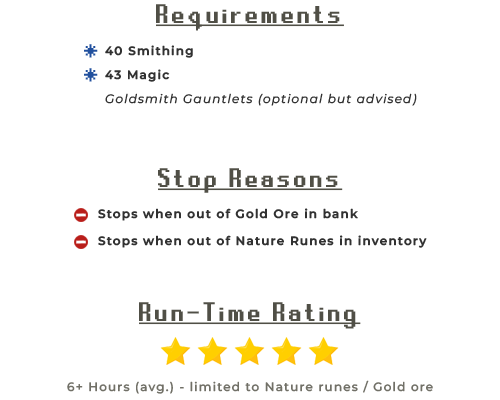
<style>
.page{position:relative;width:500px;height:400px;background:#ffffff}
.page>*{position:absolute;margin:0}
.t1{font:30px "RuneScape-UF";letter-spacing:0.1em;color:#504f46;text-decoration:underline}
.t2{font:30px "RuneScape-UF";letter-spacing:0.1em;color:#21509e}
.t3{font:12px "MontserratRoman-SemiBold";letter-spacing:0.1em;color:#313131}
.t4{font:12px "MontserratItalic-Italic";letter-spacing:0.1em;color:#313131}
.t5{font:12px "MontserratRoman-Medium";letter-spacing:0.1em;color:#717067}
</style>
<div class="page">
<p class="t1" style="left:156px;top:4px;width:188px;height:27px">Requirements</p>
<p class="t2" style="left:84px;top:44px;width:14px;height:14px">*</p>
<p class="t3" style="left:105px;top:45px;width:88px;height:13px">40 Smithing</p>
<p class="t2" style="left:84px;top:68px;width:14px;height:14px">*</p>
<p class="t3" style="left:105px;top:69px;width:65px;height:13px">43 Magic</p>
<p class="t4" style="left:105px;top:93px;width:312px;height:13px">Goldsmith Gauntlets (optional but advised)</p>
<p class="t1" style="left:158px;top:168px;width:185px;height:25px">Stop Reasons</p>
<p class="t3" style="left:98px;top:208px;width:260px;height:13px">Stops when out of Gold Ore in bank</p>
<p class="t3" style="left:98px;top:235px;width:329px;height:13px">Stops when out of Nature Runes in inventory</p>
<p class="t1" style="left:139px;top:302px;width:222px;height:27px">Run-Time Rating</p>
<p class="t5" style="left:67px;top:380px;width:366px;height:14px">6+ Hours (avg.) - limited to Nature runes / Gold ore</p>
</div>
